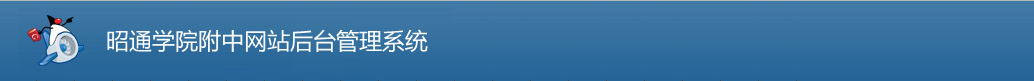
<style>
.page{position:relative;width:1034px;height:81px}
.page>*{position:absolute;margin:0}
.t1{font:23px "MicrosoftYaHei";color:#ffffff}
</style>
<div class="page">
<p class="t1" style="left:107px;top:29px;width:321px;height:23px">昭通学院附中网站后台管理系统</p>
</div>
